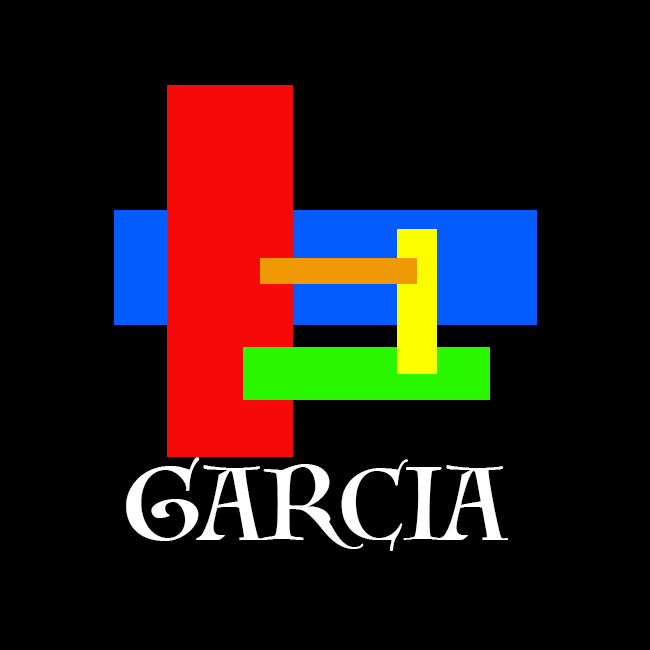
<style>
.page{position:relative;width:650px;height:650px;background:#000000}
.page>*{position:absolute;margin:0}
.t1{font:100px "Luminari-Regular";color:#fffeff}
</style>
<div class="page">
<p class="t1" style="left:126px;top:457px;width:382px;height:94px">GARCIA</p>
</div>
